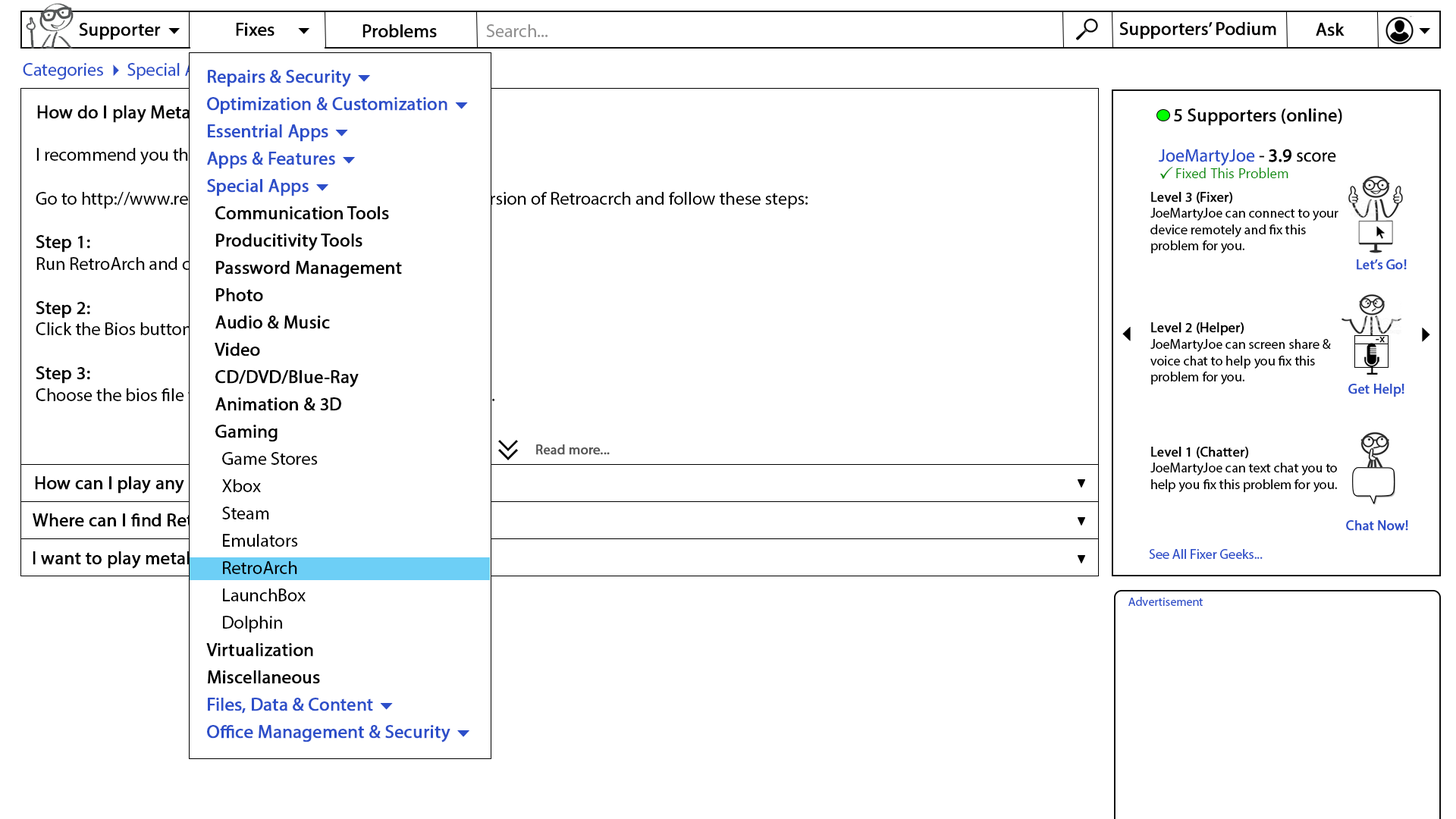
<style>
.page{position:relative;width:1456px;height:819px;background:#ffffff}
.page>*{position:absolute;margin:0}
.t1{font:18.2px "MyriadPro-Regular";color:#000000;font-weight:bold}
.t2{font:18.2px "MyriadPro-Regular";color:#919090}
.t3{font:18.2px "MyriadPro-Regular";color:#010000;font-weight:bold}
.t4{font:18.2px "MyriadPro-Regular";color:#2d4fc9}
.t5{font:18.2px/27.3px "MyriadPro-Regular";color:#000000;font-weight:bold}
.t6{font:18.2px/27.3px "MyriadPro-Regular";color:#2d4fc9;font-weight:bold}
.t7{font:18.2px/27.3px "Webdings";color:#2d4fc9;font-weight:bold}
.t8{font:18.2px/27.3px "MyriadPro-Regular";color:#000000}
.t9{font:18.2px "MyriadPro-Regular";font-weight:bold}
.t10{font:18.2px "MyriadPro-Regular"}
.t11{font:18.2px "MyriadPro-Regular";color:#000000}
.t12{font:13.6px "SegoeUI";color:#028b02}
.t13{font:13.6px "MyriadPro-Regular";color:#000000}
.t14{font:13.6px "MyriadPro-Regular";color:#000000;font-weight:bold}
.t15{font:13.6px "MyriadPro-Regular";color:#2d4fc9;font-weight:bold}
.t16{font:10.7px "SegoeUI";color:#000000;font-weight:bold}
.t17{font:13.6px "MyriadPro-Regular";color:#555555;font-weight:bold}
.t18{font:13.6px "MyriadPro-Regular";color:#2d4fc9}
.t19{font:12.1px "MyriadPro-Regular";color:#2d4fc9}
</style>
<div class="page">
<p class="t1" style="left:79px;top:23px;width:82px;height:17px">Supporter</p>
<p class="t1" style="left:236px;top:23px;width:39px;height:13px">Fixes</p>
<p class="t1" style="left:362px;top:24px;width:75px;height:14px">Problems</p>
<p class="t2" style="left:486px;top:24px;width:62px;height:13px">Search...</p>
<p class="t3" style="left:1119px;top:22px;width:157px;height:17px">Supporters’ Podium</p>
<p class="t1" style="left:1316px;top:23px;width:29px;height:13px">Ask</p>
<p class="t4" style="left:23px;top:63px;width:287px;height:17px">Categories      Special Apps       Gaming</p>
<p class="t5" style="left:206px;top:70px;width:263px;height:672px"><span class="t6">Repairs &amp; Security </span><span class="t7">6<br></span><span class="t6">Optimization &amp; Customization </span><span class="t7">6<br></span><span class="t6">Essentrial Apps </span><span class="t7">6<br></span><span class="t6">Apps &amp; Features </span><span class="t7">6<br></span><span class="t6">Special Apps </span><span class="t7">6<br></span>  Communication Tools<br>  Producitivity Tools<br>  Password Management<br>  Photo<br>  Audio &amp; Music<br>  Video<br>  CD/DVD/Blue-Ray<br>  Animation &amp; 3D<br>  Gaming<br><span class="t8">    Game Stores<br>    Xbox<br>    Steam<br>    Emulators<br>    RetroArch<br>    LaunchBox<br>    Dolphin<br></span>Virtualization<br>Miscellaneous<br><span class="t6">Files, Data &amp; Content </span><span class="t7">6<br></span><span class="t6">Office Management &amp; Security </span><span class="t7">6</span></p>
<p class="t9" style="left:37px;top:105px;width:316px;height:18px">How do I play Metal Slug on RetroArch?</p>
<p class="t1" style="left:1174px;top:108px;width:168px;height:18px">5 Supporters (online)</p>
<p class="t10" style="left:36px;top:148px;width:772px;height:253px">I recommend you the following:<br><br>Go to http://www.retroarch.com and download the latest version of Retroacrch and follow these steps:<br><br><span class="t9">Step 1:<br></span>Run RetroArch and click Settings<br><br><span class="t9">Step 2:<br></span>Click the Bios button<br><br><span class="t9">Step 3:<br></span>Choose the bios file windl.bios from the list in the Bios menu.</p>
<p class="t4" style="left:1159px;top:149px;width:177px;height:17px">JoeMartyJoe<span class="t11"> - </span><span class="t1">3.9</span><span class="t11"> score</span></p>
<p class="t12" style="left:1176px;top:168px;width:112px;height:10px">Fixed This Problem</p>
<p class="t13" style="left:1150px;top:192px;width:188px;height:300px"><span class="t14"><br>Level 3 (Fixer) <br></span>JoeMartyJoe can connect to your<br>device remotely and fix this<br>problem for you.<br><br><br><br><br><span class="t14">Level 2 (Helper)<br></span>JoeMartyJoe can screen share &amp;<br>voice chat to help you fix this<br>problem for you.<br><br><br><br><br><span class="t14">Level 1 (Chatter)<br></span>JoeMartyJoe can text chat you to<br>help you fix this problem for you.</p>
<p class="t15" style="left:1357px;top:259px;width:50px;height:11px">Let’s Go!</p>
<p class="t16" style="left:1376px;top:337px;width:9px;height:6px">-x</p>
<p class="t15" style="left:1348px;top:384px;width:56px;height:13px">Get Help!</p>
<p class="t17" style="left:536px;top:444px;width:74px;height:11px">Read more...</p>
<p class="t1" style="left:35px;top:476px;width:199px;height:18px">How can I play any ROM?</p>
<p class="t1" style="left:33px;top:513px;width:221px;height:14px">Where can I find RetroArch?</p>
<p class="t15" style="left:1346px;top:520px;width:62px;height:11px">Chat Now!</p>
<p class="t9" style="left:33px;top:551px;width:303px;height:18px">I want to play metal slug arcade game</p>
<p class="t18" style="left:1149px;top:549px;width:114px;height:10px">See All Fixer Geeks...</p>
<p class="t19" style="left:1128px;top:597px;width:75px;height:9px">Advertisement</p>
</div>
